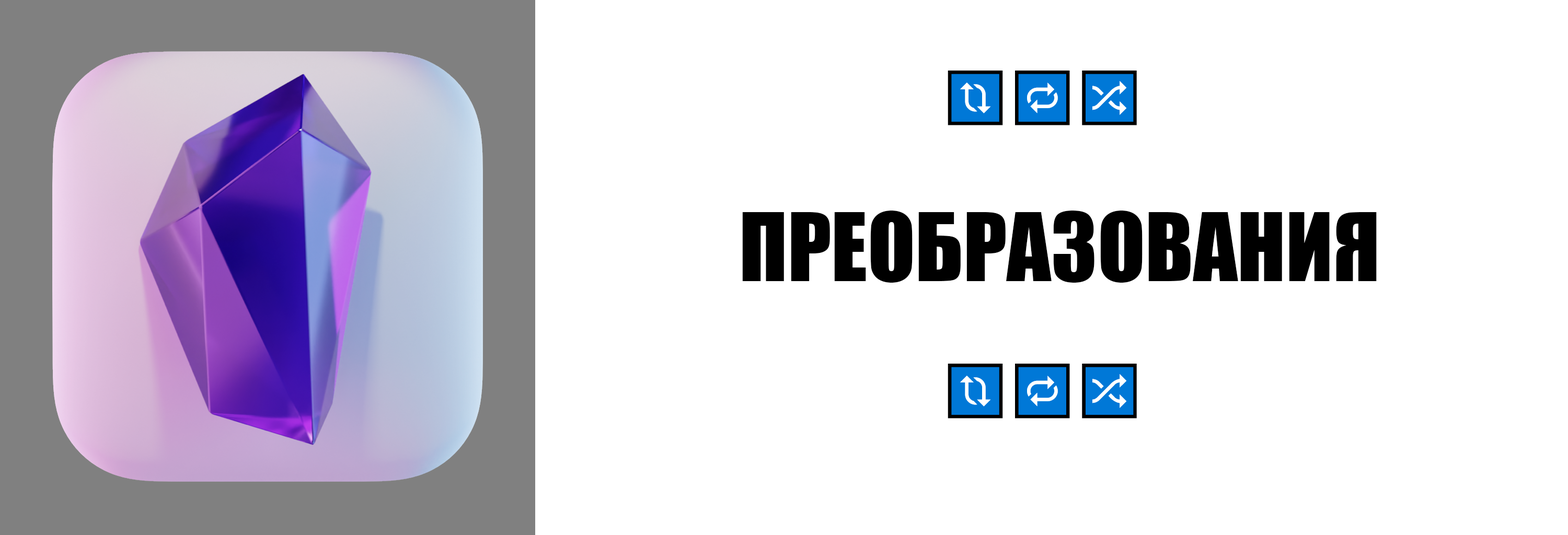
<style>
.page{position:relative;width:1568px;height:535px;background:#ffffff}
.page>*{position:absolute;margin:0}
.t1{font:87.1px "Impact";color:#000000}
</style>
<div class="page">
<p class="t1" style="left:742px;top:211px;width:635px;height:72px">ПРЕОБРАЗОВАНИЯ</p>
</div>
